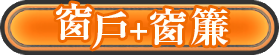
<style>
.page{position:relative;width:279px;height:55px}
.page>*{position:absolute;margin:0}
.t1{font:40px "RyuminPr6N-ExBold";letter-spacing:-0.08em;color:#fffff7}
.t2{font:40px "RyuminPr6N-ExBold";letter-spacing:0.075em;color:#fffff7}
.t3{font:30px "RyuminPr6N-ExBold";letter-spacing:0.075em;color:#fffff7}
</style>
<div class="page">
<p class="t1" style="left:56px;top:3px;width:36px;height:37px">窗</p>
<p class="t1" style="left:92px;top:11px;width:35px;height:38px">戶</p>
<p class="t2" style="left:130px;top:7px;width:99px;height:39px"><span class="t3">+</span>窗簾</p>
</div>
